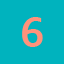
<style>
.page{position:relative;width:64px;height:64px;background:#00b3be}
.page>*{position:absolute;margin:0}
.t1{font:45.3px "Corbel-Bold";color:#ff927b}
</style>
<div class="page">
<p class="t1" style="left:22px;top:17px;width:21px;height:30px">6</p>
</div>
